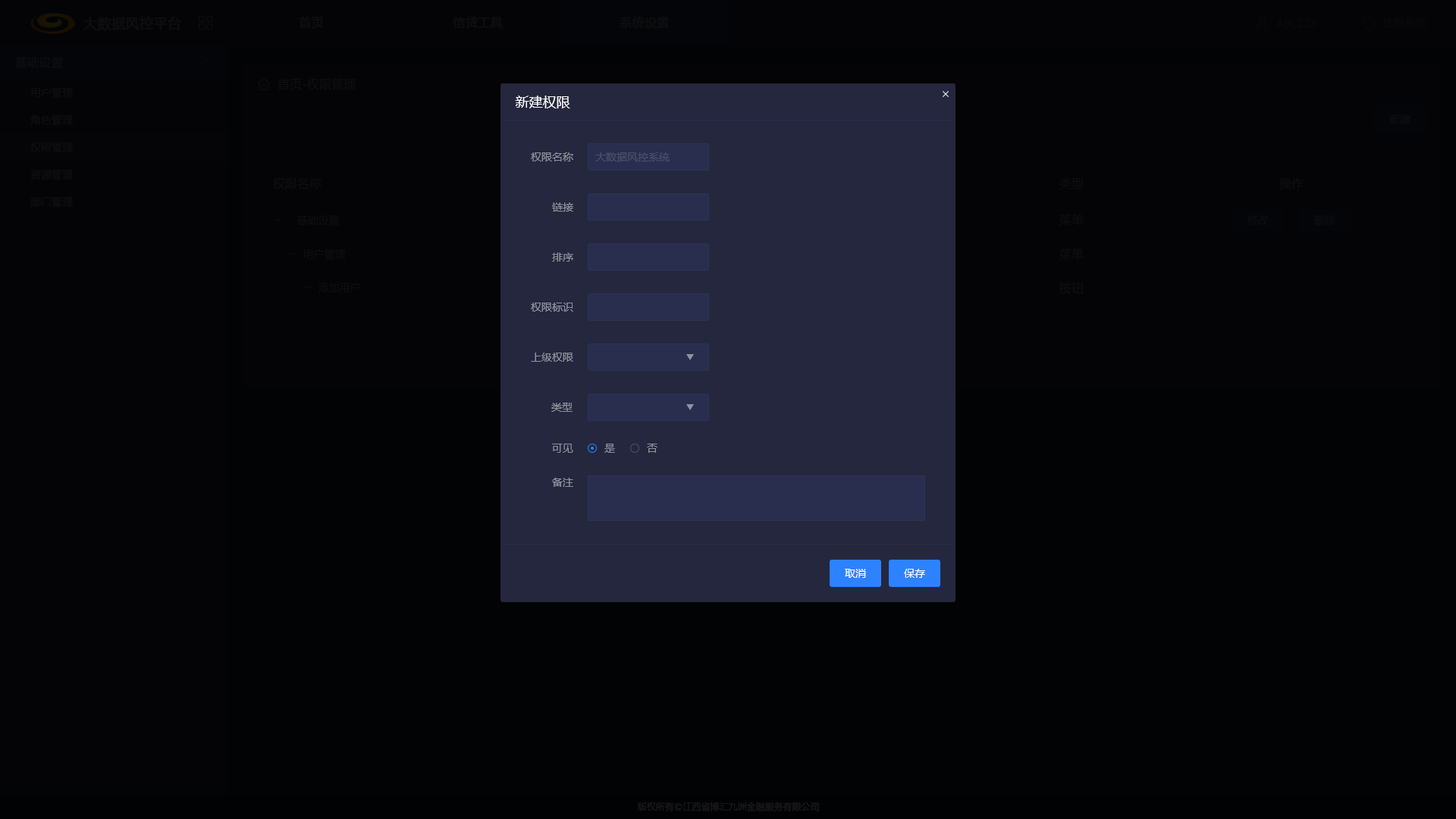
<style>
.page{position:relative;width:1456px;height:819px;background:#040406}
.page>*{position:absolute;margin:0}
.t1{font:13.6px "MicrosoftYaHei";color:#0e0e10;font-weight:bold}
.t2{font:12.1px "MicrosoftYaHei";color:#0e0e10;font-weight:bold}
.t3{font:10.6px "MicrosoftYaHei";color:#09090c}
.t4{font:12.1px "MicrosoftYaHei";color:#0e0e10}
.t5{font:10.6px "MicrosoftYaHei";color:#0e0e10}
.t6{font:13.6px "MicrosoftYaHei";color:#ffffff}
.t7{font:10.6px "MicrosoftYaHei";color:#92939f}
.t8{font:10.6px "MicrosoftYaHei";color:#4d5068}
.t9{font:10.6px "MicrosoftYaHei";color:#ffffff}
.t10{font:9.1px "MicrosoftYaHei";color:#191919}
</style>
<div class="page">
<p class="t1" style="left:83px;top:16px;width:98px;height:15px">大数据风控平台</p>
<p class="t2" style="left:299px;top:16px;width:25px;height:13px">首页</p>
<p class="t2" style="left:453px;top:17px;width:50px;height:12px">信贷工具</p>
<p class="t2" style="left:620px;top:16px;width:50px;height:13px">系统设置</p>
<p class="t3" style="left:1383px;top:17px;width:43px;height:11px">注销系统</p>
<p class="t3" style="left:1276px;top:19px;width:40px;height:8px">ABC123</p>
<p class="t4" style="left:14px;top:56px;width:49px;height:12px">基础设置</p>
<p class="t5" style="left:30px;top:87px;width:44px;height:12px">用户管理</p>
<p class="t4" style="left:278px;top:78px;width:78px;height:12px">首页-权限管理</p>
<p class="t6" style="left:515px;top:96px;width:55px;height:12px">新建权限</p>
<p class="t5" style="left:30px;top:115px;width:44px;height:11px">角色管理</p>
<p class="t5" style="left:1389px;top:115px;width:21px;height:9px">新建</p>
<p class="t5" style="left:30px;top:142px;width:44px;height:11px">权限管理</p>
<p class="t7" style="left:531px;top:152px;width:42px;height:10px">权限名称</p>
<p class="t8" style="left:595px;top:152px;width:75px;height:10px">大数据风控系统</p>
<p class="t5" style="left:30px;top:169px;width:44px;height:11px">资源管理</p>
<p class="t4" style="left:273px;top:177px;width:49px;height:13px">权限名称</p>
<p class="t4" style="left:1059px;top:177px;width:25px;height:13px">类型</p>
<p class="t4" style="left:1279px;top:177px;width:25px;height:13px">操作</p>
<p class="t5" style="left:30px;top:196px;width:44px;height:12px">部门管理</p>
<p class="t7" style="left:552px;top:202px;width:21px;height:10px">链接</p>
<p class="t5" style="left:297px;top:215px;width:43px;height:10px">基础设置</p>
<p class="t4" style="left:1059px;top:214px;width:25px;height:12px">菜单</p>
<p class="t5" style="left:1247px;top:215px;width:22px;height:11px">修改</p>
<p class="t5" style="left:1313px;top:215px;width:22px;height:11px">删除</p>
<p class="t5" style="left:303px;top:249px;width:43px;height:11px">用户管理</p>
<p class="t7" style="left:552px;top:253px;width:21px;height:9px">排序</p>
<p class="t4" style="left:1059px;top:248px;width:25px;height:12px">菜单</p>
<p class="t5" style="left:318px;top:282px;width:41px;height:11px">添加用户</p>
<p class="t4" style="left:1059px;top:282px;width:25px;height:12px">按钮</p>
<p class="t7" style="left:531px;top:303px;width:42px;height:9px">权限标识</p>
<p class="t7" style="left:531px;top:353px;width:42px;height:9px">上级权限</p>
<p class="t7" style="left:551px;top:403px;width:22px;height:9px">类型</p>
<p class="t7" style="left:552px;top:444px;width:21px;height:9px">可见</p>
<p class="t7" style="left:604px;top:444px;width:11px;height:9px">是</p>
<p class="t7" style="left:647px;top:444px;width:10px;height:9px">否</p>
<p class="t7" style="left:552px;top:478px;width:21px;height:9px">备注</p>
<p class="t9" style="left:845px;top:569px;width:21px;height:9px">取消</p>
<p class="t9" style="left:904px;top:569px;width:21px;height:9px">保存</p>
<p class="t10" style="left:637px;top:802px;width:182px;height:9px">版权所有©江西省博汇九洲金融服务有限公司</p>
</div>
